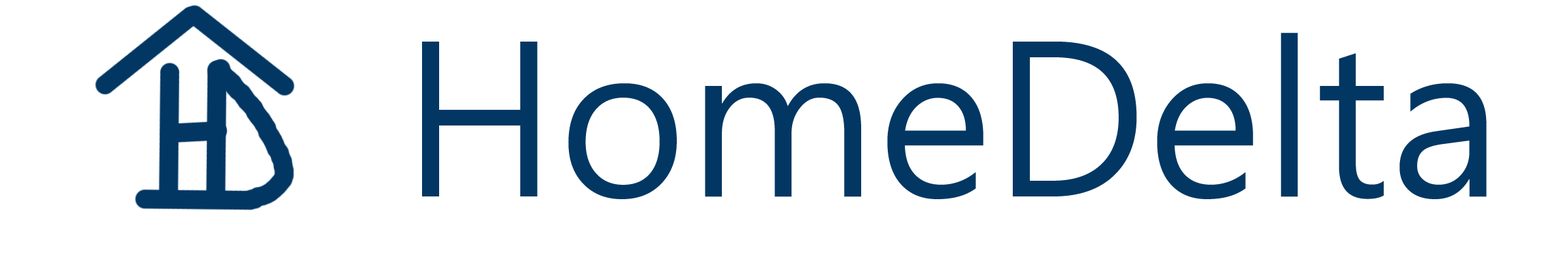
<style>
.page{position:relative;width:1568px;height:266px;background:#ffffff}
.page>*{position:absolute;margin:0}
.t1{font:204.9px "MicrosoftJhengHeiUIRegular";color:#023763}
</style>
<div class="page">
<p class="t1" style="left:422px;top:33px;width:1065px;height:166px">HomeDelta</p>
</div>
